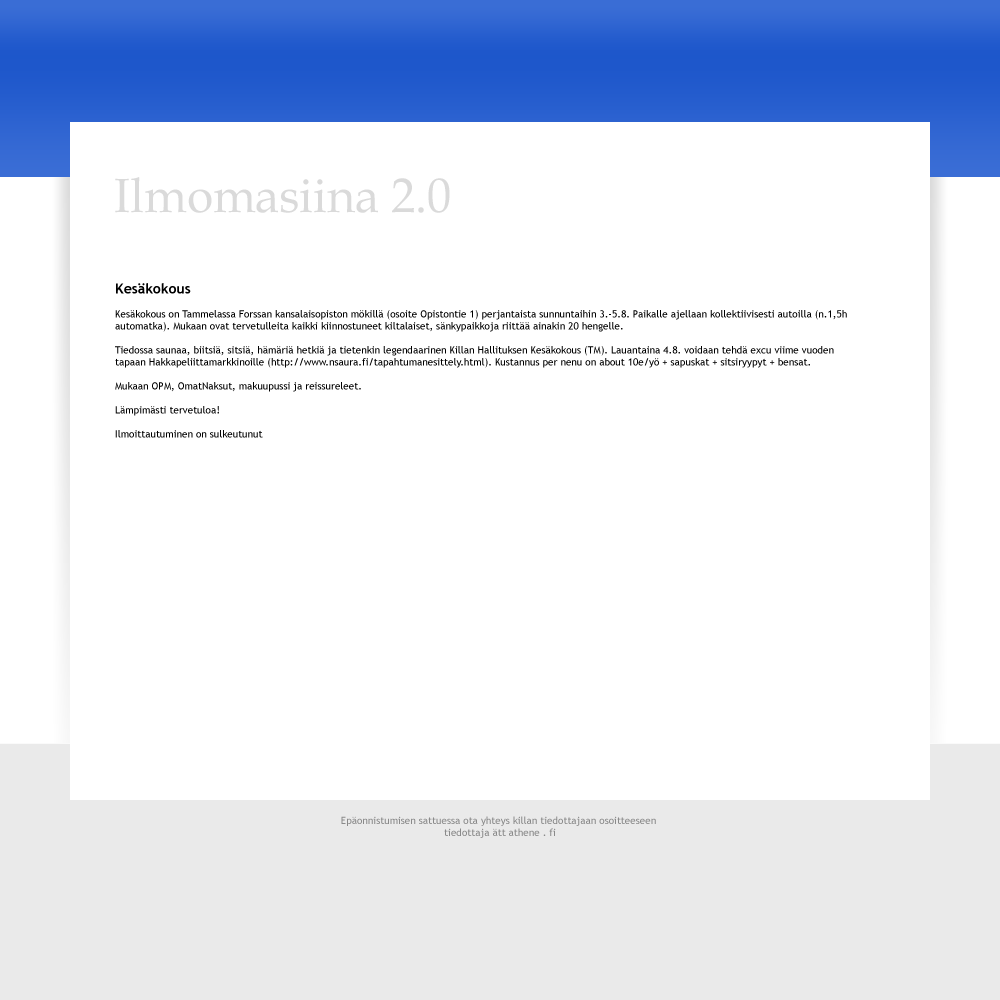
<style>
.page{position:relative;width:1000px;height:1000px;background:#ffffff}
.page>*{position:absolute;margin:0}
.t1{font:48px "BookAntiqua";color:#dadada}
.t2{font:10px "TrebuchetMS";color:#000000}
.t3{font:14px "TrebuchetMS-Bold";color:#000000}
.t4{font:10px "TrebuchetMS";color:#8a8a8a}
</style>
<div class="page">
<p class="t1" style="left:115px;top:177px;width:335px;height:36px">Ilmomasiina 2.0</p>
<p class="t2" style="left:115px;top:283px;width:732px;height:155px"><span class="t3">Kesäkokous<br></span><br>Kesäkokous on Tammelassa Forssan kansalaisopiston mökillä (osoite Opistontie 1) perjantaista sunnuntaihin 3.-5.8. Paikalle ajellaan kollektiivisesti autoilla (n.1,5h automatka). Mukaan ovat tervetulleita kaikki kiinnostuneet kiltalaiset, sänkypaikkoja riittää ainakin 20 hengelle.<br><br>Tiedossa saunaa, biitsiä, sitsiä, hämäriä hetkiä ja tietenkin legendaarinen Killan Hallituksen Kesäkokous (TM). Lauantaina 4.8. voidaan tehdä excu viime vuoden tapaan Hakkapeliittamarkkinoille (http://www.nsaura.fi/tapahtumanesittely.html). Kustannus per nenu on about 10e/yö + sapuskat + sitsiryypyt + bensat.<br><br>Mukaan OPM, OmatNaksut, makuupussi ja reissureleet.<br><br>Lämpimästi tervetuloa!<br><br>Ilmoittautuminen on sulkeutunut</p>
<p class="t4" style="left:341px;top:816px;width:315px;height:22px;text-align:center">Epäonnistumisen sattuessa ota yhteys killan tiedottajaan osoitteeseen <br>tiedottaja ätt athene . fi</p>
</div>
